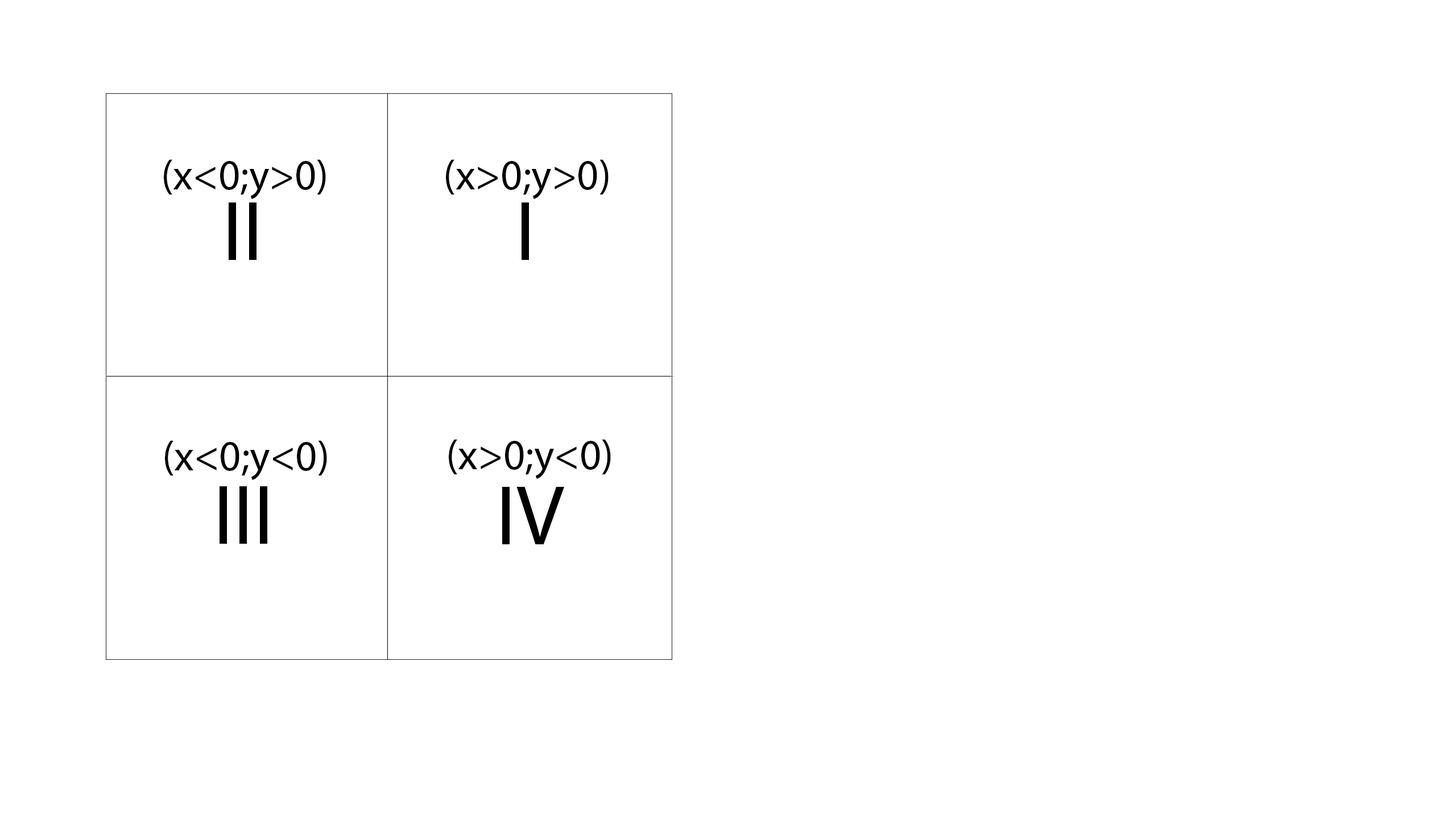
<style>
.page{position:relative;width:1456px;height:819px;background:#ffffff}
.page>*{position:absolute;margin:0}
.t1{font:42.7px "MyriadPro-Regular";color:#000000}
.t2{font:85.3px "MyriadPro-Regular";color:#000000}
</style>
<div class="page">
<p class="t1" style="left:164px;top:159px;width:162px;height:40px">(x&lt;0;y&gt;0)</p>
<p class="t1" style="left:446px;top:159px;width:163px;height:40px">(x&gt;0;y&gt;0)</p>
<p class="t2" style="left:229px;top:202px;width:28px;height:58px">II</p>
<p class="t1" style="left:165px;top:440px;width:162px;height:40px">(x&lt;0;y&lt;0)</p>
<p class="t1" style="left:449px;top:439px;width:162px;height:40px">(x&gt;0;y&lt;0)</p>
<p class="t2" style="left:220px;top:486px;width:47px;height:58px">III</p>
<p class="t2" style="left:502px;top:487px;width:62px;height:57px">IV</p>
</div>
